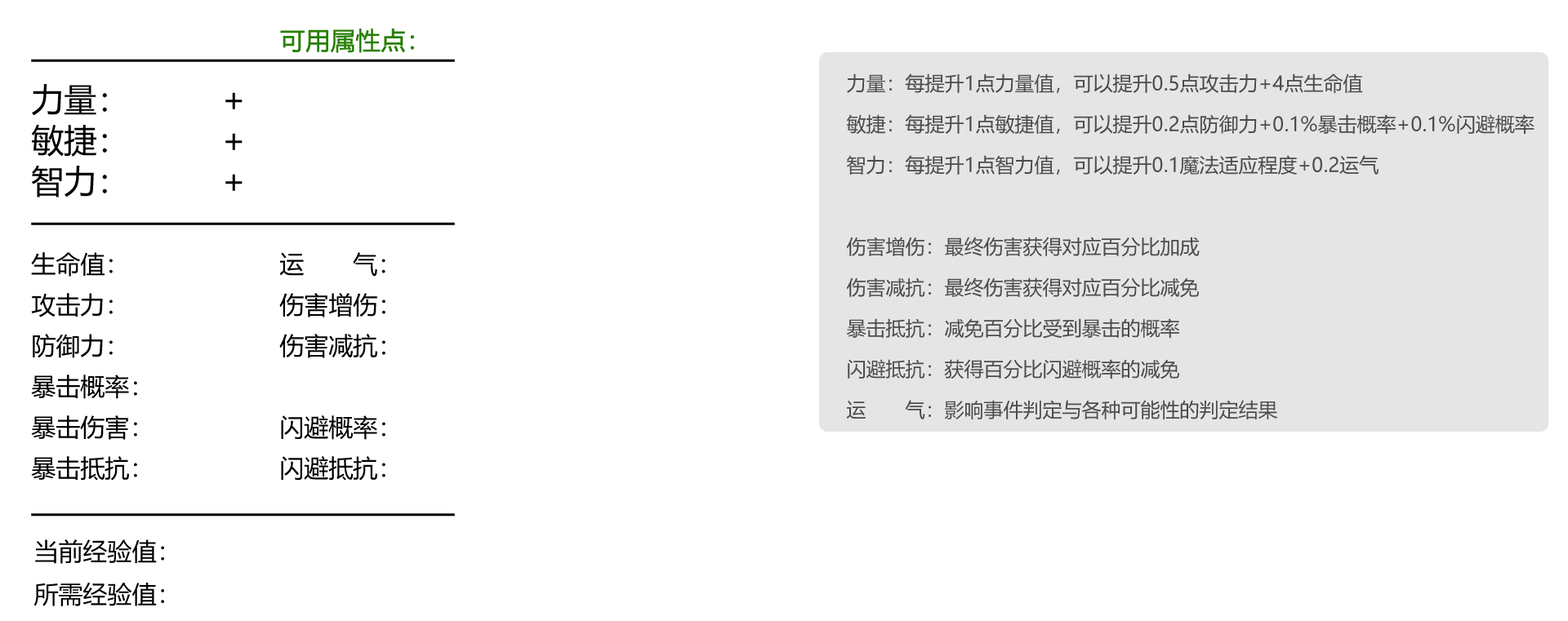
<style>
.page{position:relative;width:1568px;height:621px;background:#ffffff}
.page>*{position:absolute;margin:0}
.t1{font:24.5px "MicrosoftYaHei";color:#277f00;font-weight:bold}
.t2{font:32.7px/40.8px "MicrosoftYaHei";color:#000000}
.t3{font:19.6px/40.8px "MicrosoftYaHei";color:#4c4c4c}
.t4{font:24.5px/40.8px "MicrosoftYaHei";color:#000000}
.t5{font:24.5px "MicrosoftYaHei";color:#000000}
</style>
<div class="page">
<p class="t1" style="left:280px;top:29px;width:134px;height:24px">可用属性点：</p>
<p class="t2" style="left:31px;top:59px;width:424px;height:166px">————————————<br>力量：<br>敏捷：<br>智力：<br>————————————</p>
<p class="t3" style="left:846px;top:74px;width:689px;height:346px">力量：每提升1点力量值，可以提升0.5点攻击力+4点生命值<br>敏捷：每提升1点敏捷值，可以提升0.2点防御力+0.1%暴击概率+0.1%闪避概率<br>智力：每提升1点智力值，可以提升0.1魔法适应程度+0.2运气<br><br>伤害增伤：最终伤害获得对应百分比加成<br>伤害减抗：最终伤害获得对应百分比减免<br>暴击抵抗：减免百分比受到暴击的概率<br>闪避抵抗：获得百分比闪避概率的减免<br>运  气：影响事件判定与各种可能性的判定结果</p>
<p class="t2" style="left:225px;top:92px;width:18px;height:99px">+<br>+<br>+</p>
<p class="t4" style="left:31px;top:252px;width:424px;height:265px">生命值：<br>攻击力：<br>防御力：<br>暴击概率：<br>暴击伤害：<br>暴击抵抗：<br><span class="t2">————————————</span></p>
<p class="t4" style="left:279px;top:252px;width:106px;height:229px">运    气：<br>伤害增伤：<br>伤害减抗：<br><br>闪避概率：<br>闪避抵抗：</p>
<p class="t5" style="left:33px;top:540px;width:131px;height:67px">当前经验值：<br>所需经验值：</p>
</div>
